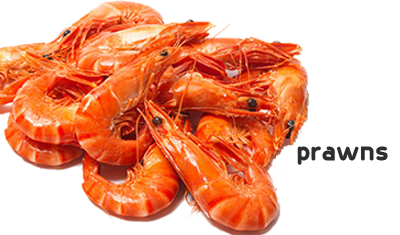
<style>
.page{position:relative;width:400px;height:235px;background:#ffffff}
.page>*{position:absolute;margin:0}
.t1{font:28px "20thCenturyFont";color:#302d2d;font-weight:bold}
</style>
<div class="page">
<p class="t1" style="left:297px;top:146px;width:91px;height:19px">prawns</p>
</div>
